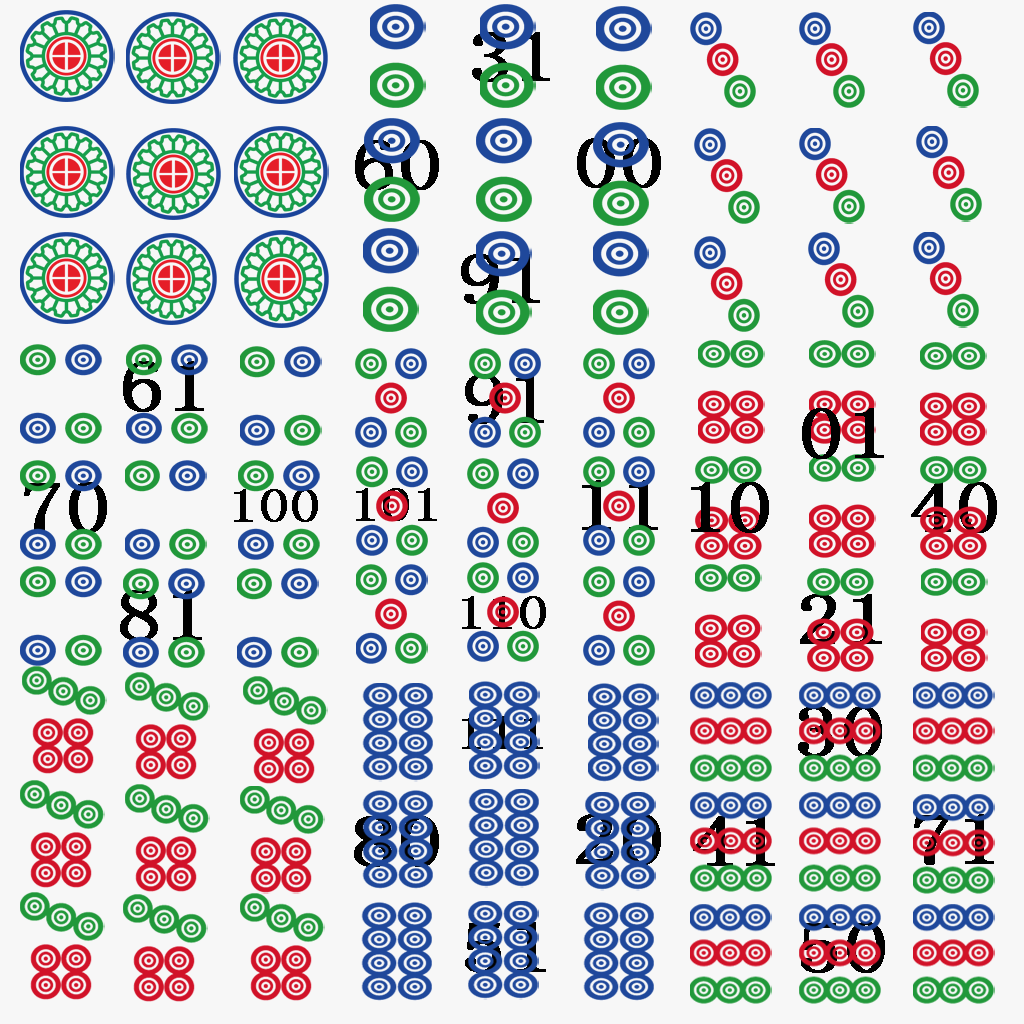
<style>
.page{position:relative;width:1024px;height:1024px;background:#f7f7f7}
.page>*{position:absolute;margin:0}
.t1{font:71.3px "NSimSun";color:#010101;font-variant:small-caps;font-weight:bold;scale:1.22 1}
.t2{font:72px "NSimSun";color:#010101;font-variant:small-caps;font-weight:bold;scale:1.22 1}
.t3{font:48px "NSimSun";color:#010101;font-variant:small-caps;font-weight:bold;scale:1.22 1}
.t4{font:48px "NSimSun";font-variant:small-caps;font-weight:bold;scale:1.22 1}
.t5{font:72px "NSimSun";font-variant:small-caps;font-weight:bold;scale:1.22 1}
</style>
<div class="page">
<p class="t1" style="left:472px;top:32px;width:78px;height:50px">31</p>
<p class="t1" style="left:355px;top:140px;width:84px;height:50px">60</p>
<p class="t1" style="left:577px;top:138px;width:84px;height:50px">00</p>
<p class="t1" style="left:461px;top:254px;width:79px;height:50px">91</p>
<p class="t2" style="left:123px;top:361px;width:81px;height:51px">61</p>
<p class="t1" style="left:465px;top:374px;width:79px;height:50px">91</p>
<p class="t2" style="left:802px;top:408px;width:82px;height:51px">01</p>
<p class="t2" style="left:24px;top:482px;width:83px;height:51px">70</p>
<p class="t2" style="left:582px;top:480px;width:76px;height:50px">11</p>
<p class="t2" style="left:691px;top:482px;width:78px;height:51px">10</p>
<p class="t2" style="left:911px;top:482px;width:86px;height:51px">40</p>
<p class="t3" style="left:234px;top:489px;width:84px;height:33px">100</p>
<p class="t3" style="left:356px;top:488px;width:81px;height:33px">101</p>
<p class="t2" style="left:120px;top:590px;width:82px;height:51px">81</p>
<p class="t3" style="left:462px;top:596px;width:84px;height:33px">110</p>
<p class="t2" style="left:800px;top:594px;width:82px;height:50px">21</p>
<p class="t2" style="left:798px;top:706px;width:84px;height:51px">30</p>
<p class="t4" style="left:462px;top:716px;width:81px;height:33px">111</p>
<p class="t5" style="left:354px;top:816px;width:85px;height:51px">80</p>
<p class="t5" style="left:576px;top:814px;width:85px;height:51px">20</p>
<p class="t5" style="left:693px;top:816px;width:82px;height:50px">41</p>
<p class="t5" style="left:914px;top:814px;width:80px;height:51px">71</p>
<p class="t5" style="left:465px;top:922px;width:81px;height:51px">51</p>
<p class="t5" style="left:801px;top:922px;width:84px;height:51px">50</p>
</div>
